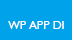
<style>
.page{position:relative;width:72px;height:40px;background:#00a2e9}
.page>*{position:absolute;margin:0}
.t1{font:12px "Humanist521BT-Roman";color:#fefefe}
</style>
<div class="page">
<p class="t1" style="left:8px;top:21px;width:56px;height:8px">WP APP DI</p>
</div>
